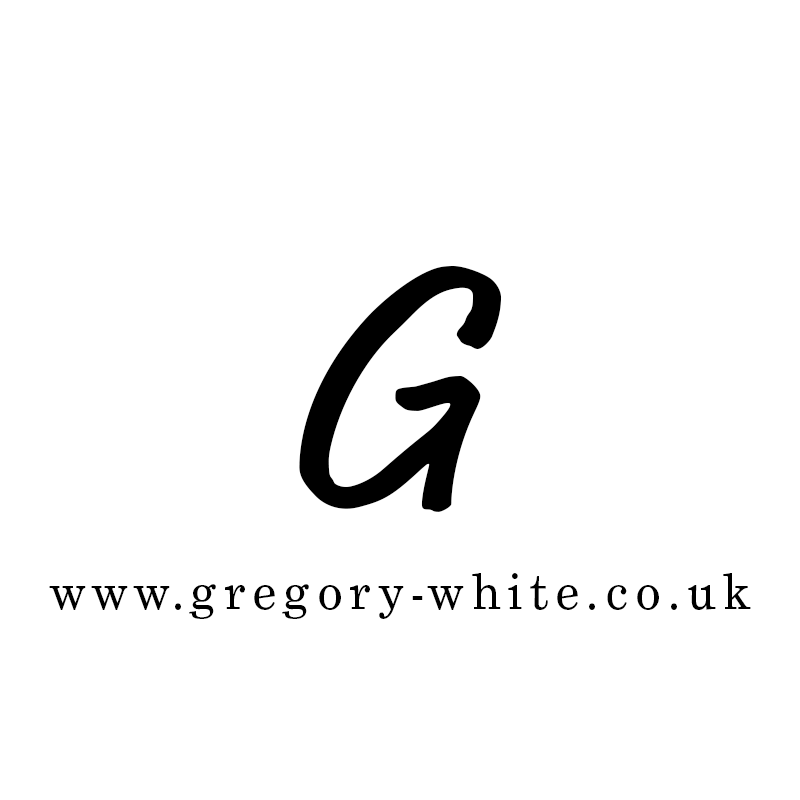
<style>
.page{position:relative;width:800px;height:800px;background:#ffffff}
.page>*{position:absolute;margin:0}
.t1{font:345.2px "MarketOT";color:#000000}
.t2{font:50px "Grad";letter-spacing:0.16em;color:#000000}
</style>
<div class="page">
<p class="t1" style="left:299px;top:266px;width:203px;height:246px">G</p>
<p class="t2" style="left:49px;top:573px;width:702px;height:46px">www.gregory-white.co.uk</p>
</div>
